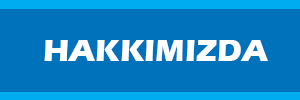
<style>
.page{position:relative;width:300px;height:100px;background:#0072bb}
.page>*{position:absolute;margin:0}
.t1{font:32px "ErasITC-Bold";color:#ffffff}
</style>
<div class="page">
<p class="t1" style="left:44px;top:40px;width:224px;height:21px">HAKKIMIZDA</p>
</div>
